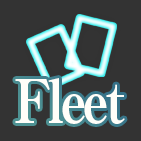
<style>
.page{position:relative;width:141px;height:141px;background:#333333}
.page>*{position:absolute;margin:0}
.t1{font:60px "RyuminPro-ExBold";letter-spacing:-0.075em;color:#fffef9;scale:0.9 1}
.t2{font:60px "RyuminPro-ExBold";letter-spacing:-0.085em;color:#fffef9;scale:0.9 1}
.t3{font:60px "RyuminPro-ExBold";letter-spacing:-0.08em;color:#fffef9;scale:0.9 1}
</style>
<div class="page">
<p class="t1" style="left:15px;top:78px;width:110px;height:46px"><span class="t2">F</span>l<span class="t3">e</span>et</p>
</div>
